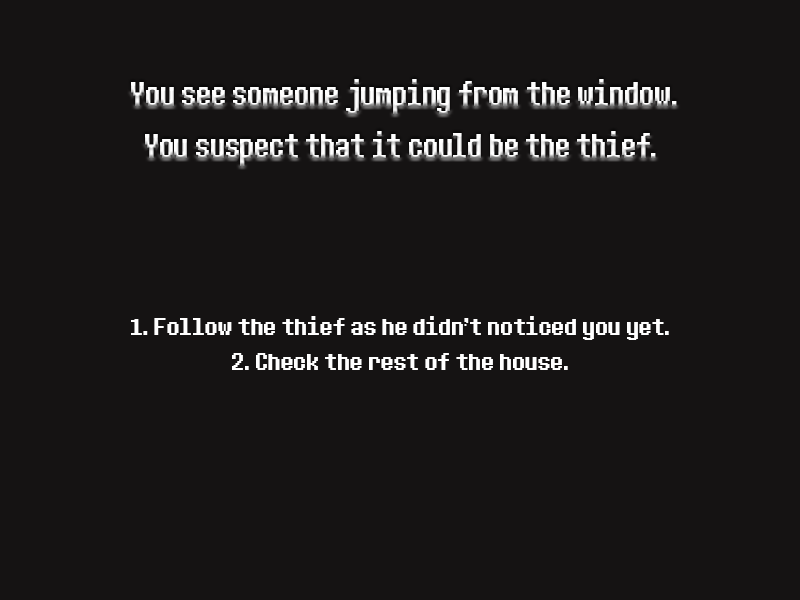
<style>
.page{position:relative;width:800px;height:600px;background:#151313}
.page>*{position:absolute;margin:0}
.t1{font:42.9px "DeterminationSansWeb";color:#ffffff;scale:0.79 1}
.t2{font:29.2px "DeterminationSansWeb";color:#ffffff}
</style>
<div class="page">
<p class="t1" style="left:131px;top:79px;width:546px;height:87px;text-align:center">You see someone jumping from the window.<br>You suspect that it could be the thief.</p>
<p class="t2" style="left:131px;top:316px;width:538px;height:54px;text-align:center">1. Follow the thief as he didn’t noticed you yet.<br>2. Check the rest of the house.</p>
</div>
